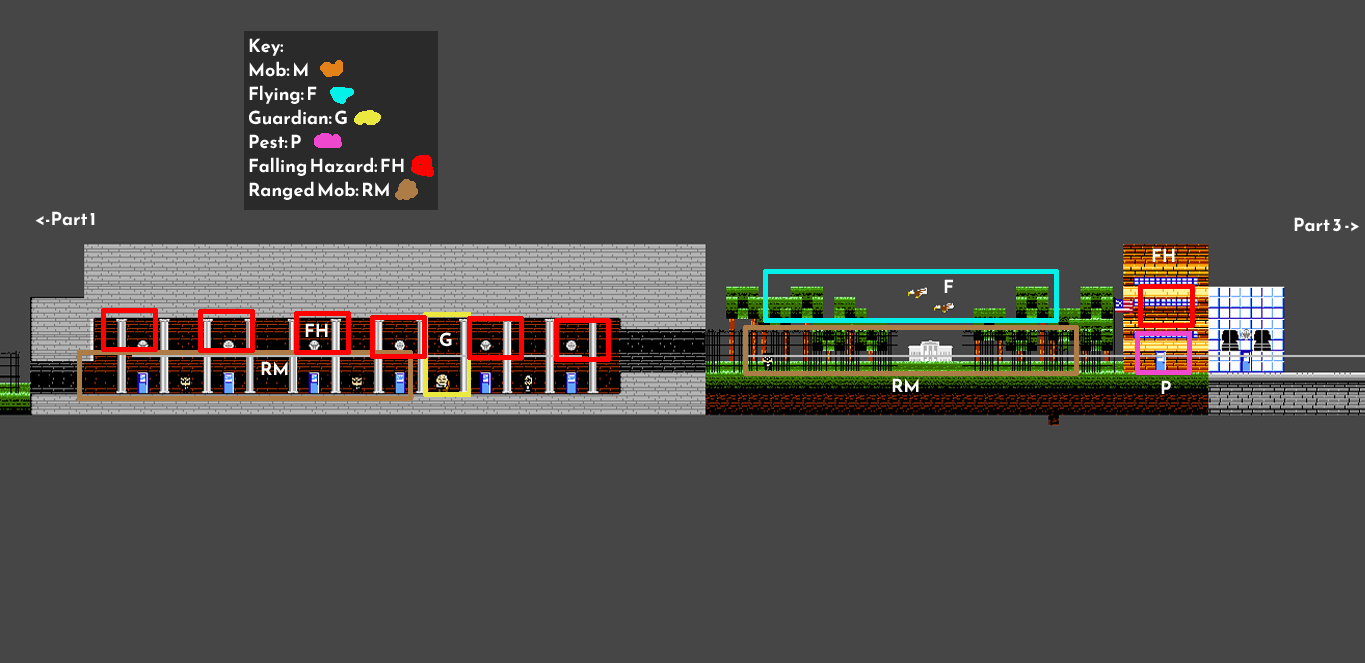
<style>
.page{position:relative;width:1365px;height:663px;background:#464646}
.page>*{position:absolute;margin:0}
.t1{font:18px/12px "ReemKufi-Bold";color:#fffefe}
.t2{font:18px/12px "ReemKufi-Bold";color:#ffffff}
.t3{font:18px "ReemKufi-Bold";color:#ffffff}
.t4{font:18px "ReemKufi-Bold";color:#fcfcfc}
</style>
<div class="page">
<p class="t1" style="left:249px;top:38px;width:155px;height:162px">Key:<br><br>Mob: <span class="t2">M<br></span><br>Flying: F<br><br>Guardian: G<br><br>Pest: P<br><br>Falling Hazard: FH<br><br>Ranged Mob: RM</p>
<p class="t3" style="left:35px;top:211px;width:60px;height:15px">&lt;-Part 1</p>
<p class="t3" style="left:1294px;top:217px;width:66px;height:15px">Part 3 -&gt;</p>
<p class="t4" style="left:1152px;top:248px;width:23px;height:14px">FH</p>
<p class="t4" style="left:944px;top:279px;width:9px;height:14px">F</p>
<p class="t4" style="left:305px;top:323px;width:23px;height:14px">FH</p>
<p class="t4" style="left:440px;top:332px;width:12px;height:15px">G</p>
<p class="t4" style="left:261px;top:361px;width:27px;height:14px">RM</p>
<p class="t4" style="left:892px;top:378px;width:27px;height:14px">RM</p>
<p class="t4" style="left:1161px;top:380px;width:10px;height:14px">P</p>
</div>
